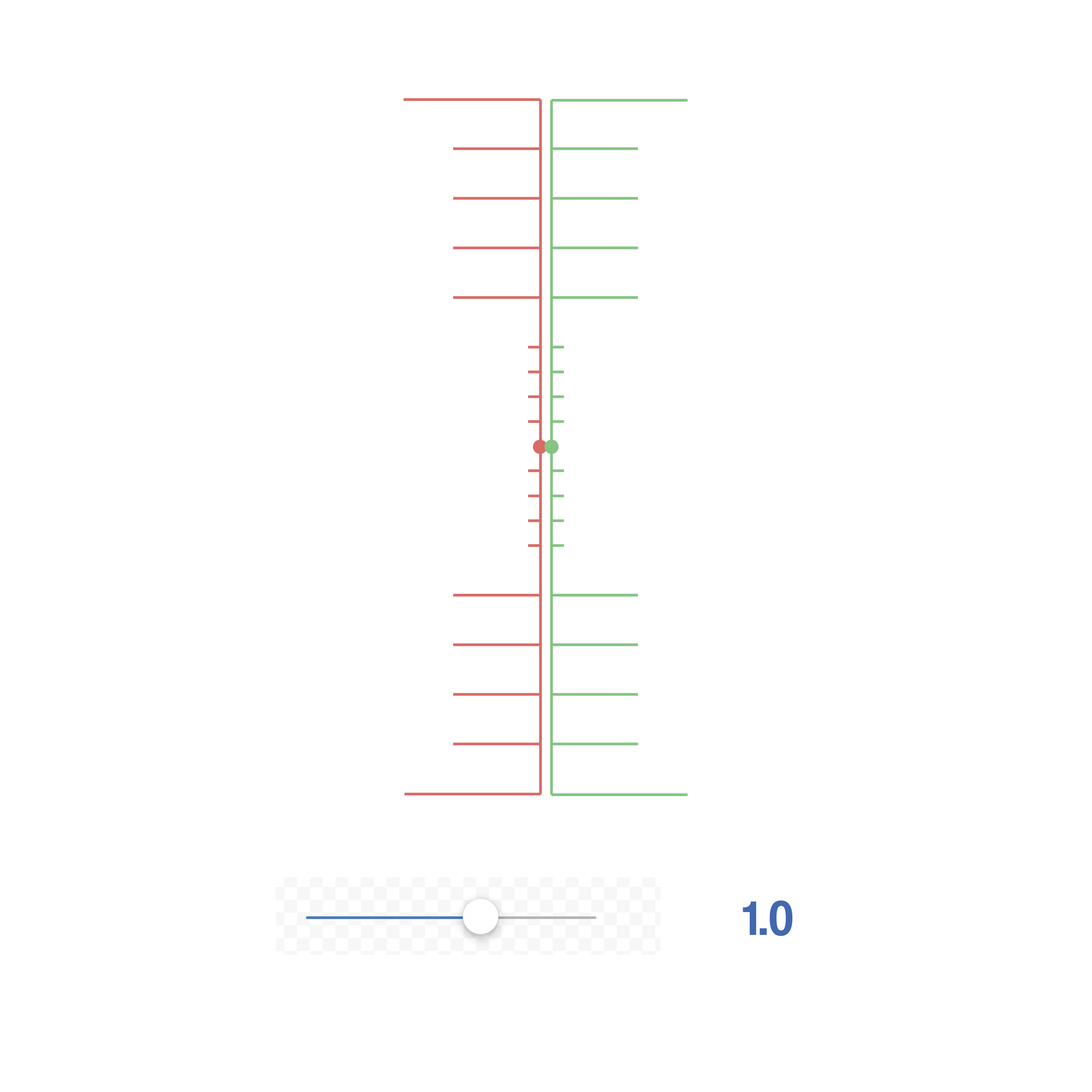
<style>
.page{position:relative;width:1092px;height:1092px;background:#ffffff}
.page>*{position:absolute;margin:0}
.t1{font:49.6px "CoolveticaRg-Regular";letter-spacing:0.025em;color:#4268af}
</style>
<div class="page">
<p class="t1" style="left:743px;top:901px;width:49px;height:35px">1.0</p>
</div>
